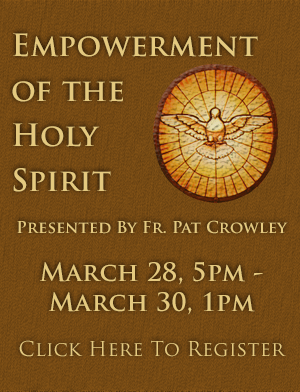
<style>
.page{position:relative;width:300px;height:392px}
.page>*{position:absolute;margin:0}
.t1{font:30px/45px "TrajanPro-Bold";letter-spacing:0.01em;color:#e4c97f}
.t2{font:16px/24px "TrajanPro-Bold";letter-spacing:0.01em;color:#e4c97f}
.t3{font:25px/30px "TrajanPro-Bold";letter-spacing:0.01em;color:#e4c97f}
.t4{font:20px/45px "TrajanPro-Regular";letter-spacing:0.01em;color:#e4c97f}
</style>
<div class="page">
<p class="t1" style="left:12px;top:33px;width:276px;height:324px">Empowerment<br>of the<br>Holy<br>Spirit<br><br><span class="t2">Presented By Fr. Pat Crowley<br><br></span><span class="t3">March 28, 5pm -<br>March 30, 1pm<br></span><span class="t4">Click Here To Register</span></p>
</div>
